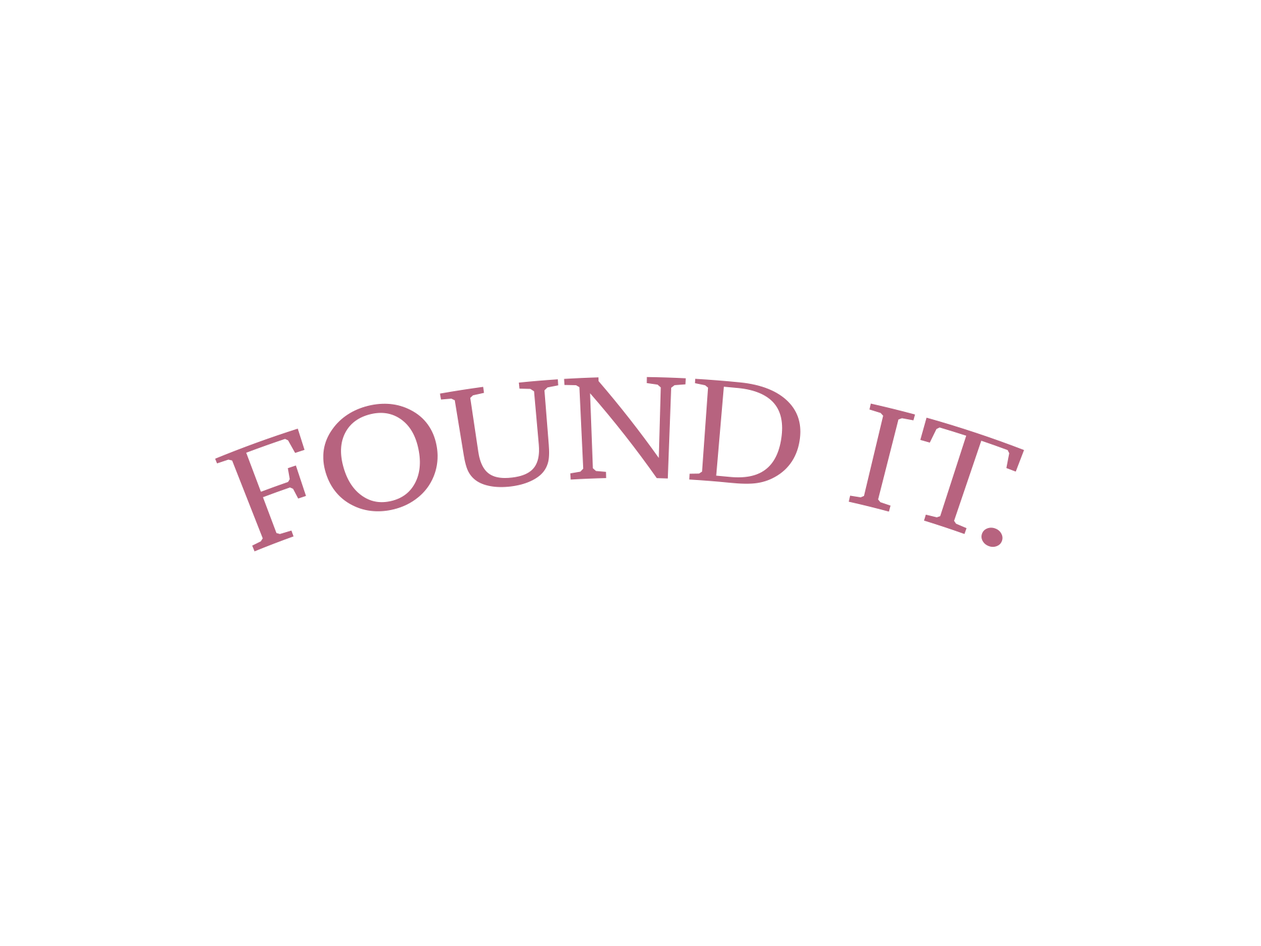
<style>
.page{position:relative;width:1261px;height:946px;background:#ffffff}
.page>*{position:absolute;margin:0}
.t1{font:150px "Charter-Roman";color:#b7637f}
</style>
<div class="page">
<p class="t1" style="left:215px;top:376px;width:809px;height:175px">FOUND IT.</p>
</div>
